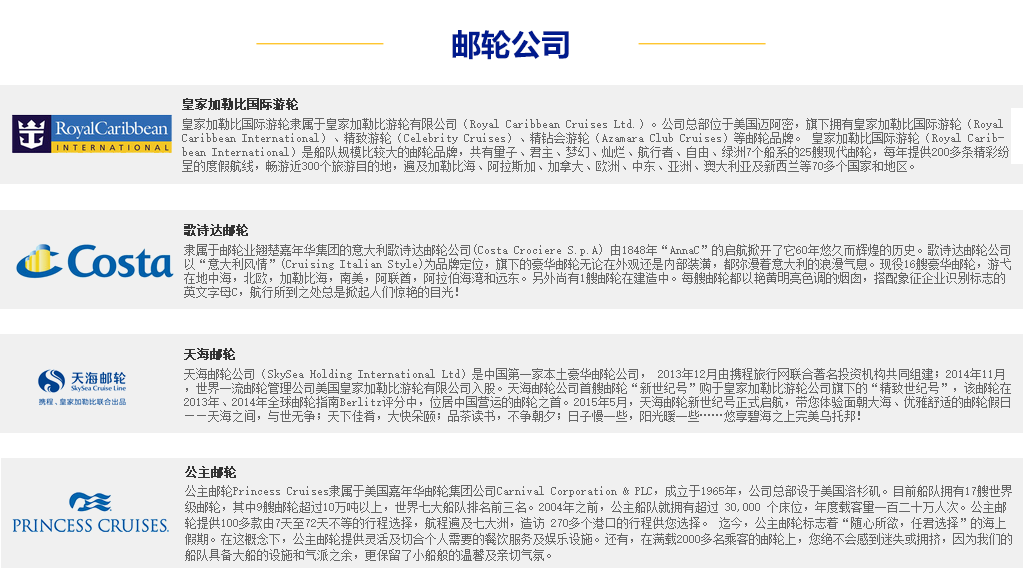
<style>
.page{position:relative;width:1023px;height:586px;background:#f0f0f0}
.page>*{position:absolute;margin:0}
.t1{font:30px "MicrosoftYaHei-Bold";color:#001a8d}
.t2{font:12px "SimSun";color:#333333;font-weight:bold}
.t3{font:12px/14px "SimSun";color:#666666}
.t4{font:12px/16px "SimSun";color:#666666}
</style>
<div class="page">
<p class="t1" style="left:452px;top:30px;width:117px;height:30px">邮轮公司</p>
<p class="t2" style="left:182px;top:98px;width:116px;height:12px">皇家加勒比国际游轮</p>
<p class="t3" style="left:182px;top:118px;width:827px;height:54px">皇家加勒比国际游轮隶属于皇家加勒比游轮有限公司（Royal Caribbean Cruises Ltd.）。公司总部位于美国迈阿密，旗下拥有皇家加勒比国际游轮（Royal Caribbean International）、精致游轮（Celebrity Cruises）、精钻会游轮（Azamara Club Cruises）等邮轮品牌。 皇家加勒比国际游轮（Royal Caribbean International）是船队规模比较大的邮轮品牌，共有量子、君主、梦幻、灿烂、航行者、自由、绿洲7个船系的25艘现代邮轮，每年提供200多条精彩纷呈的度假航线，畅游近300个旅游目的地，遍及加勒比海、阿拉斯加、加拿大、欧洲、中东、亚洲、澳大利亚及新西兰等70多个国家和地区。</p>
<p class="t2" style="left:184px;top:224px;width:64px;height:12px">歌诗达邮轮</p>
<p class="t3" style="left:184px;top:244px;width:827px;height:54px">隶属于邮轮业翘楚嘉年华集团的意大利歌诗达邮轮公司(Costa Crociere S.p.A) 由1848年“AnnaC”的启航掀开了它60年悠久而辉煌的历史。歌诗达邮轮公司以“意大利风情”(Cruising Italian Style)为品牌定位，旗下的豪华邮轮无论在外观还是内部装潢，都弥漫着意大利的浪漫气息。现役16艘豪华邮轮，游弋在地中海，北欧，加勒比海，南美，阿联酋，阿拉伯海湾和远东。另外尚有1艘邮轮在建造中。每艘邮轮都以艳黄明亮色调的烟囱，搭配象征企业识别标志的英文字母C，航行所到之处总是掀起人们惊艳的目光！</p>
<p class="t2" style="left:184px;top:348px;width:51px;height:12px">天海邮轮</p>
<p class="t3" style="left:184px;top:368px;width:827px;height:54px">天海邮轮公司（SkySea Holding International Ltd）是中国第一家本土豪华邮轮公司， 2013年12月由携程旅行网联合著名投资机构共同组建；2014年11月，世界一流邮轮管理公司美国皇家加勒比游轮有限公司入股。天海邮轮公司首艘邮轮“新世纪号”购于皇家加勒比游轮公司旗下的“精致世纪号”，该邮轮在2013年、2014年全球邮轮指南Berlitz评分中，位居中国营运的邮轮之首。2015年5月，天海邮轮新世纪号正式启航，带您体验面朝大海、优雅舒适的邮轮假日——天海之间，与世无争；天下佳肴，大快朵颐；品茶读书，不争朝夕；日子慢一些，阳光暖一些……悠享碧海之上完美乌托邦！</p>
<p class="t2" style="left:185px;top:466px;width:51px;height:12px">公主邮轮</p>
<p class="t4" style="left:185px;top:485px;width:827px;height:76px">公主邮轮Princess Cruises隶属于美国嘉年华邮轮集团公司Carnival Corporation &amp; PLC，成立于1965年，公司总部设于美国洛杉矶。目前船队拥有17艘世界级邮轮，其中9艘邮轮超过10万吨以上，世界七大船队排名前三名。2004年之前，公主船队就拥有超过 30,000 个床位，年度载客量一百二十万人次。公主邮轮提供100多款由7天至72天不等的行程选择，航程遍及七大洲，造访 270多个港口的行程供您选择。 迄今，公主邮轮标志着“随心所欲，任君选择”的海上假期。在这概念下，公主邮轮提供灵活及切合个人需要的餐饮服务及娱乐设施。还有，在满载2000多名乘客的邮轮上，您绝不会感到迷失或拥挤，因为我们的船队具备大船的设施和气派之余，更保留了小船般的温馨及亲切气氛。</p>
</div>
